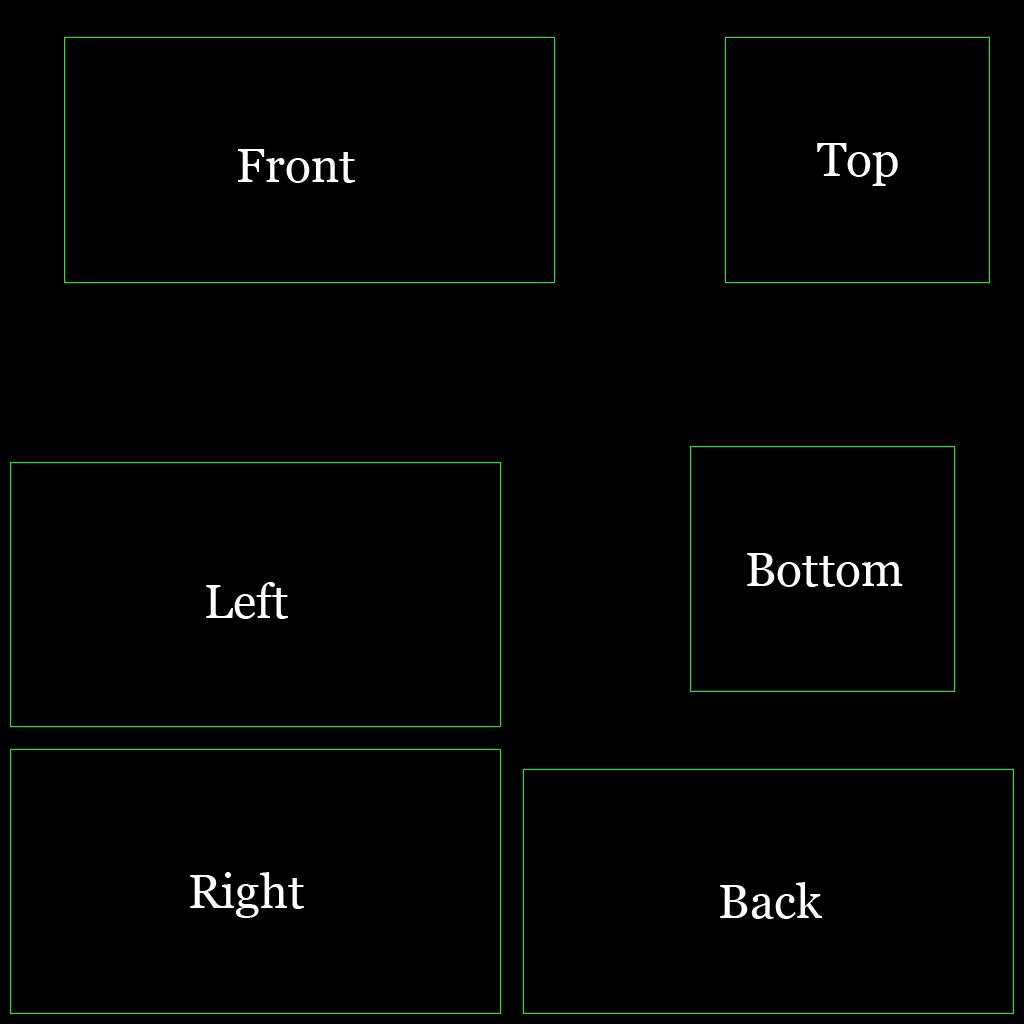
<style>
.page{position:relative;width:1024px;height:1024px;background:#000000}
.page>*{position:absolute;margin:0}
.t1{font:48px "Georgia";color:#ffffff}
</style>
<div class="page">
<p class="t1" style="left:238px;top:149px;width:117px;height:34px">Front</p>
<p class="t1" style="left:817px;top:143px;width:81px;height:43px">Top</p>
<p class="t1" style="left:747px;top:553px;width:156px;height:34px">Bottom</p>
<p class="t1" style="left:206px;top:582px;width:82px;height:37px">Left</p>
<p class="t1" style="left:190px;top:872px;width:114px;height:46px">Right</p>
<p class="t1" style="left:720px;top:882px;width:103px;height:37px">Back</p>
</div>
